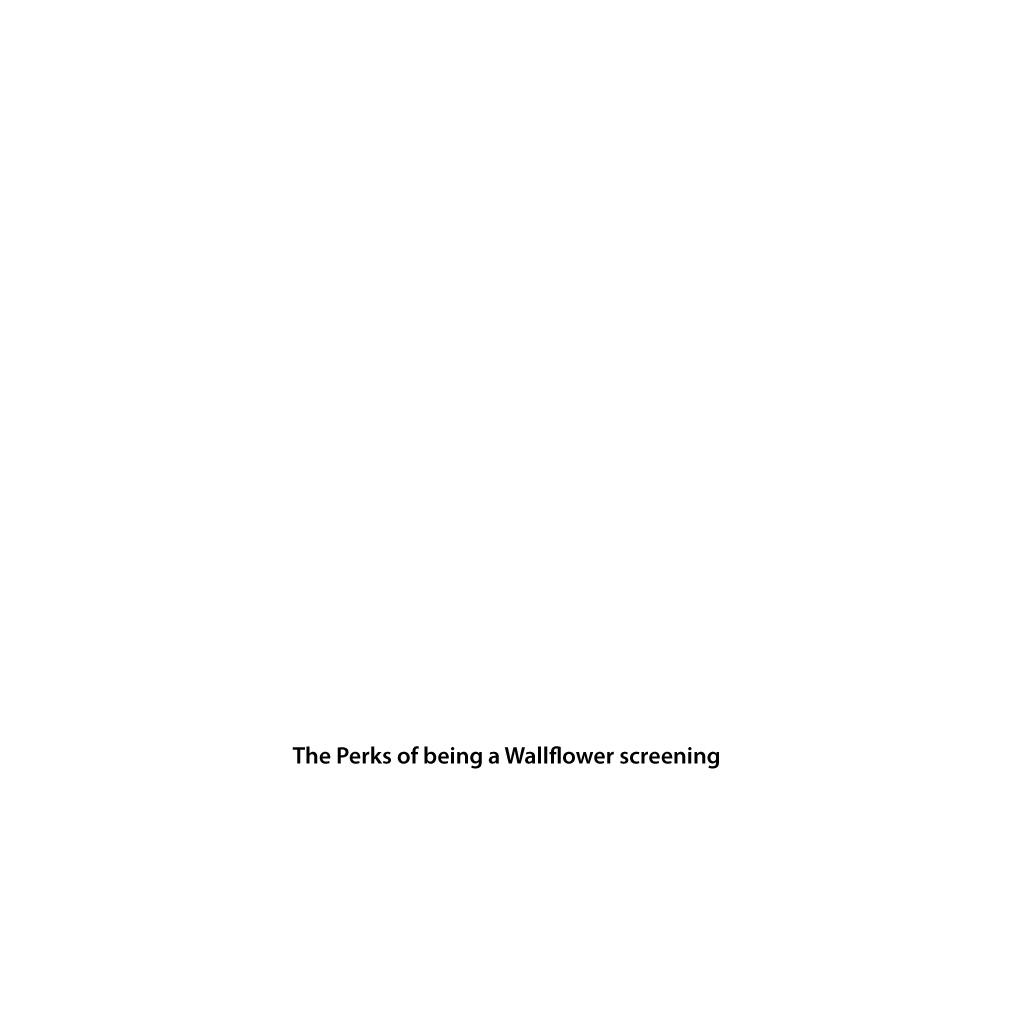
<style>
.page{position:relative;width:1020px;height:1020px;background:#ffffff}
.page>*{position:absolute;margin:0}
.t1{font:24px "MyriadPro-Semibold";color:#000000}
</style>
<div class="page">
<p class="t1" style="left:292px;top:746px;width:427px;height:23px">The Perks of being a Wallflower screening</p>
</div>
